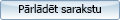
<style>
.page{position:relative;width:120px;height:20px}
.page>*{position:absolute;margin:0}
.t1{font:11px "Tahoma";color:#000000}
</style>
<div class="page">
<p class="t1" style="left:19px;top:4px;width:82px;height:9px">Pārlādēt sarakstu</p>
</div>
